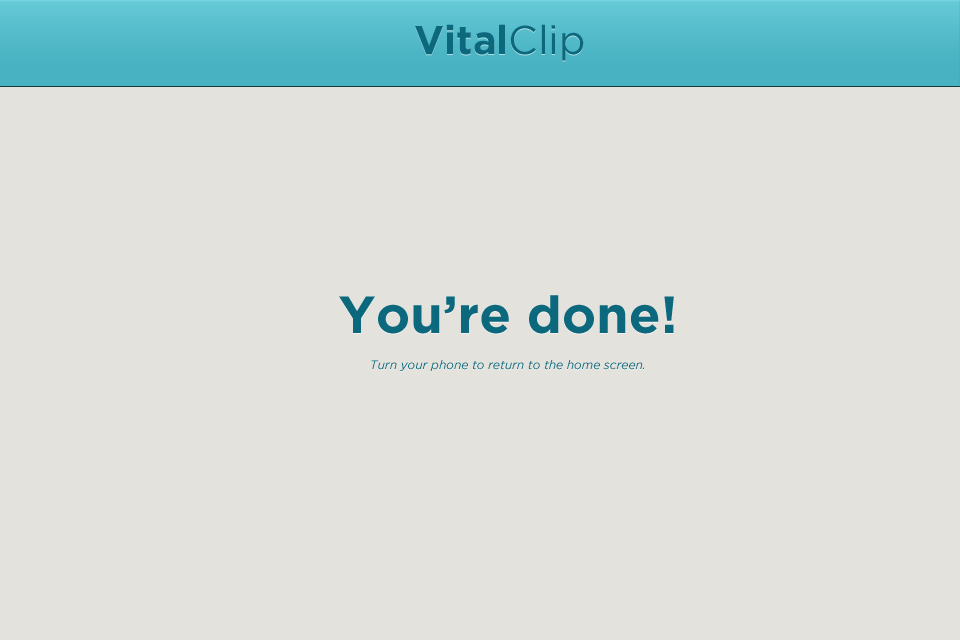
<style>
.page{position:relative;width:960px;height:640px;background:#e3e2dc}
.page>*{position:absolute;margin:0}
.t1{font:40px "Gotham-Bold";color:#0c687c}
.t2{font:40px "Gotham-Book";color:#0c687c}
.t3{font:12px/36px "Gotham-BookItalic";color:#0c687c}
.t4{font:52px/36px "Gotham-Bold";color:#0c687c}
</style>
<div class="page">
<p class="t1" style="left:415px;top:24px;width:169px;height:37px">Vital<span class="t2">Clip</span></p>
<p class="t3" style="left:339px;top:295px;width:335px;height:76px;text-align:center"><span class="t4">You’re done!<br></span>Turn your phone to return to the home screen.</p>
</div>
